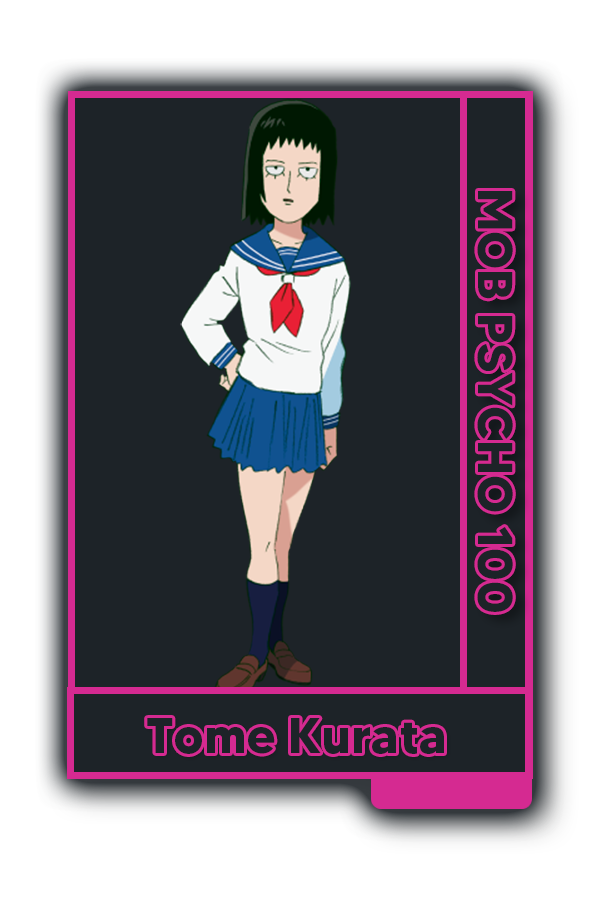
<style>
.page{position:relative;width:600px;height:900px;background:#1d2328}
.page>*{position:absolute;margin:0}
.t1{font:48.8px "MADETOMMY-Bold";color:#1d2328}
.t2{font:49.7px "MADETOMMY-Bold";color:#1d2328}
</style>
<div class="page">
<p class="t1" style="left:477px;top:191px;width:36px;height:421px;rotate:90deg">MOB PSYCHO 100</p>
<p class="t2" style="left:147px;top:718px;width:297px;height:36px">Tome Kurata</p>
</div>
